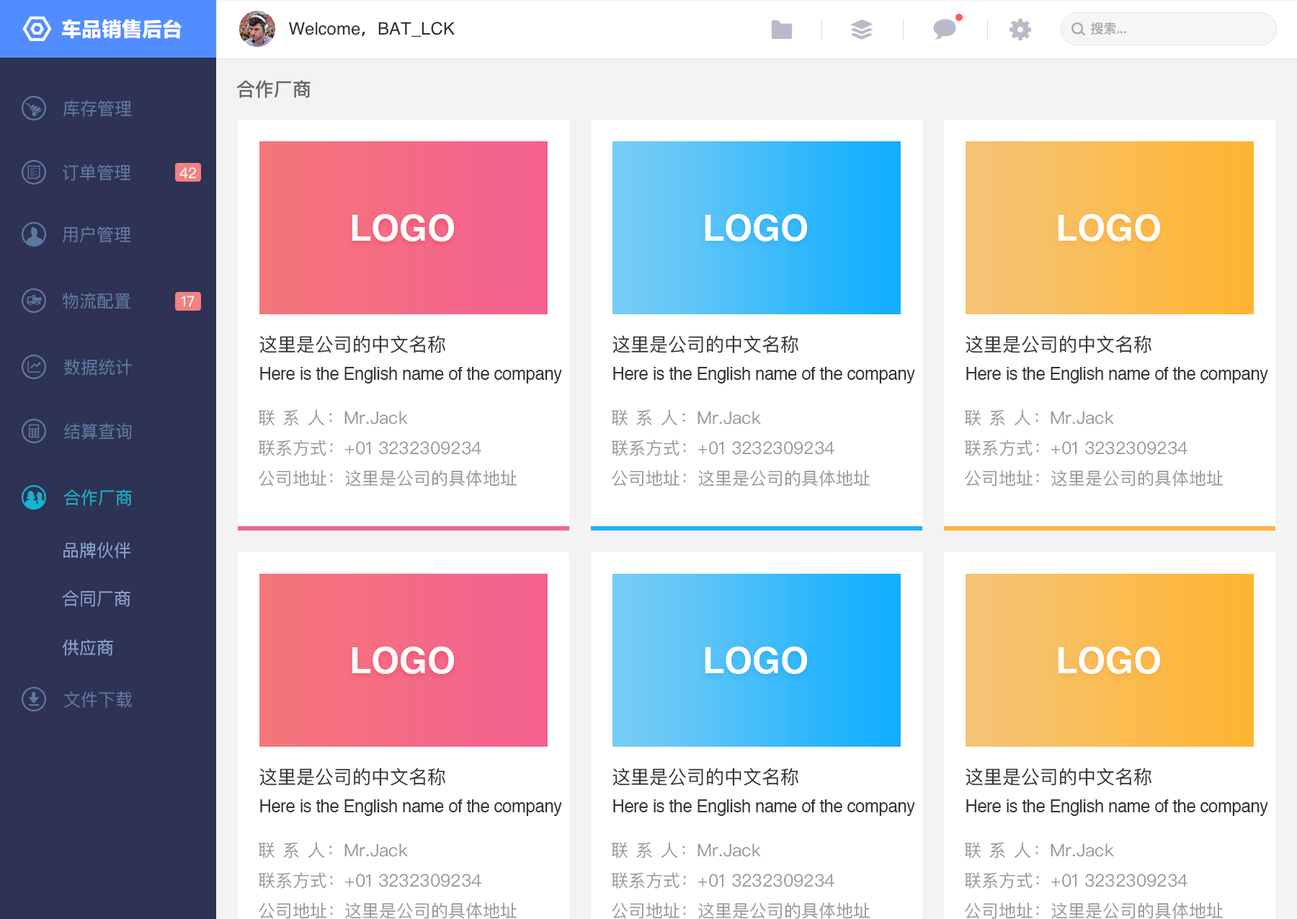
<style>
.page{position:relative;width:1297px;height:919px;background:#ffffff}
.page>*{position:absolute;margin:0}
.t1{font:20.2px "FZLTTHK--GBK1-0";color:#ffffff}
.t2{font:17.3px "Helvetica";color:#333333}
.t3{font:17.3px "AdobeHeitiStd-Regular";color:#333333}
.t4{font:13px "PingFangSC-Regular";color:#aaaaaa}
.t5{font:18.7px "PingFangSC-Medium";color:#666666}
.t6{font:17.3px "PingFangSC-Regular";color:#5f78a2}
.t7{font:14.4px "PingFangSC-Regular";color:#ffffff}
.t8{font:36px "Helvetica-Bold";color:#ffffff}
.t9{font:18.7px "PingFangSC-Regular";color:#333333}
.t10{font:17.3px "Helvetica";letter-spacing:-0.02em;color:#333333}
.t11{font:17.3px "PingFangSC-Regular";color:#999999}
.t12{font:17.3px "PingFangSC-Regular";color:#14b5cf}
.t13{font:17.3px "PingFangSC-Regular";color:#8aa3cd}
</style>
<div class="page">
<p class="t1" style="left:62px;top:19px;width:120px;height:20px">车品销售后台</p>
<p class="t2" style="left:289px;top:22px;width:166px;height:15px">Welcome<span class="t3">，</span>BAT_LCK</p>
<p class="t4" style="left:1091px;top:22px;width:36px;height:13px">搜索...</p>
<p class="t5" style="left:236px;top:80px;width:75px;height:18px">合作厂商</p>
<p class="t6" style="left:63px;top:100px;width:68px;height:17px">库存管理</p>
<p class="t6" style="left:63px;top:164px;width:67px;height:17px">订单管理</p>
<p class="t7" style="left:179px;top:167px;width:17px;height:12px">42</p>
<p class="t8" style="left:352px;top:214px;width:102px;height:27px">LOGO</p>
<p class="t8" style="left:705px;top:214px;width:102px;height:27px">LOGO</p>
<p class="t8" style="left:1058px;top:214px;width:103px;height:27px">LOGO</p>
<p class="t6" style="left:63px;top:226px;width:67px;height:17px">用户管理</p>
<p class="t6" style="left:63px;top:293px;width:67px;height:16px">物流配置</p>
<p class="t7" style="left:181px;top:296px;width:14px;height:11px">17</p>
<p class="t9" style="left:259px;top:335px;width:186px;height:18px">这里是公司的中文名称</p>
<p class="t9" style="left:613px;top:335px;width:186px;height:18px">这里是公司的中文名称</p>
<p class="t9" style="left:966px;top:335px;width:186px;height:18px">这里是公司的中文名称</p>
<p class="t6" style="left:64px;top:359px;width:68px;height:17px">数据统计</p>
<p class="t10" style="left:260px;top:367px;width:302px;height:16px">Here is the English name of the company</p>
<p class="t10" style="left:613px;top:367px;width:302px;height:16px">Here is the English name of the company</p>
<p class="t10" style="left:967px;top:367px;width:302px;height:16px">Here is the English name of the company</p>
<p class="t11" style="left:259px;top:409px;width:149px;height:17px">联 系 人：Mr.Jack</p>
<p class="t11" style="left:612px;top:409px;width:149px;height:17px">联 系 人：Mr.Jack</p>
<p class="t11" style="left:965px;top:409px;width:149px;height:17px">联 系 人：Mr.Jack</p>
<p class="t6" style="left:64px;top:423px;width:68px;height:17px">结算查询</p>
<p class="t11" style="left:259px;top:440px;width:223px;height:16px">联系方式：+01 3232309234</p>
<p class="t11" style="left:612px;top:440px;width:223px;height:16px">联系方式：+01 3232309234</p>
<p class="t11" style="left:965px;top:440px;width:223px;height:16px">联系方式：+01 3232309234</p>
<p class="t11" style="left:259px;top:470px;width:258px;height:17px">公司地址：这里是公司的具体地址</p>
<p class="t11" style="left:612px;top:470px;width:258px;height:17px">公司地址：这里是公司的具体地址</p>
<p class="t11" style="left:965px;top:470px;width:258px;height:17px">公司地址：这里是公司的具体地址</p>
<p class="t12" style="left:63px;top:489px;width:69px;height:17px">合作厂商</p>
<p class="t13" style="left:63px;top:542px;width:67px;height:17px">品牌伙伴</p>
<p class="t13" style="left:62px;top:590px;width:68px;height:17px">合同厂商</p>
<p class="t13" style="left:62px;top:639px;width:51px;height:17px">供应商</p>
<p class="t8" style="left:352px;top:647px;width:102px;height:27px">LOGO</p>
<p class="t8" style="left:705px;top:647px;width:102px;height:27px">LOGO</p>
<p class="t8" style="left:1058px;top:647px;width:103px;height:27px">LOGO</p>
<p class="t6" style="left:64px;top:691px;width:68px;height:17px">文件下载</p>
<p class="t9" style="left:259px;top:768px;width:186px;height:18px">这里是公司的中文名称</p>
<p class="t9" style="left:613px;top:768px;width:186px;height:18px">这里是公司的中文名称</p>
<p class="t9" style="left:966px;top:768px;width:186px;height:18px">这里是公司的中文名称</p>
<p class="t10" style="left:260px;top:799px;width:302px;height:17px">Here is the English name of the company</p>
<p class="t10" style="left:613px;top:799px;width:302px;height:17px">Here is the English name of the company</p>
<p class="t10" style="left:967px;top:799px;width:302px;height:17px">Here is the English name of the company</p>
<p class="t11" style="left:259px;top:842px;width:149px;height:16px">联 系 人：Mr.Jack</p>
<p class="t11" style="left:612px;top:842px;width:149px;height:16px">联 系 人：Mr.Jack</p>
<p class="t11" style="left:965px;top:842px;width:149px;height:16px">联 系 人：Mr.Jack</p>
<p class="t11" style="left:259px;top:872px;width:223px;height:17px">联系方式：+01 3232309234</p>
<p class="t11" style="left:612px;top:872px;width:223px;height:17px">联系方式：+01 3232309234</p>
<p class="t11" style="left:965px;top:872px;width:223px;height:17px">联系方式：+01 3232309234</p>
<p class="t11" style="left:259px;top:902px;width:258px;height:17px">公司地址：这里是公司的具体地址</p>
<p class="t11" style="left:612px;top:902px;width:258px;height:17px">公司地址：这里是公司的具体地址</p>
<p class="t11" style="left:965px;top:902px;width:258px;height:17px">公司地址：这里是公司的具体地址</p>
</div>
